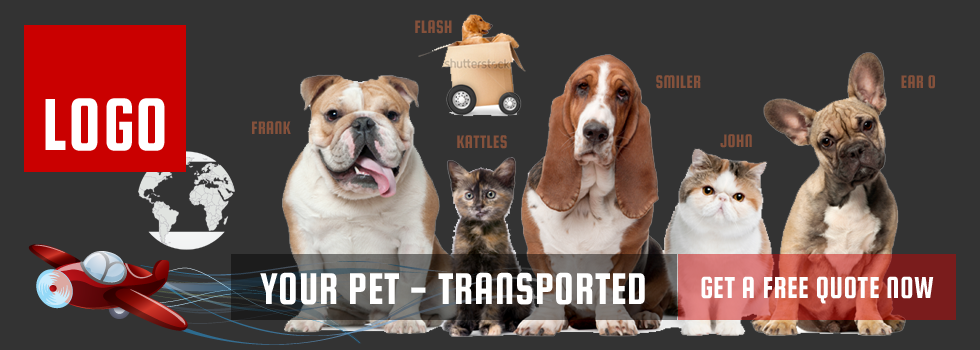
<style>
.page{position:relative;width:980px;height:350px;background:#333333}
.page>*{position:absolute;margin:0}
.t1{font:19.4px "SquadaOne-Regular";letter-spacing:0.02em;color:#85513b;scale:0.87 1}
.t2{font:78.8px "SquadaOne-Regular";letter-spacing:0.02em;color:#ffffff;scale:0.87 1}
.t3{font:47.4px "SquadaOne-Regular";letter-spacing:0.02em;color:#ffffff;scale:0.87 1}
.t4{font:32.5px "SquadaOne-Regular";letter-spacing:0.02em;color:#ffffff;scale:0.87 1}
</style>
<div class="page">
<p class="t1" style="left:415px;top:20px;width:37px;height:14px">FLASH</p>
<p class="t1" style="left:656px;top:75px;width:45px;height:14px">SMILER</p>
<p class="t1" style="left:901px;top:75px;width:34px;height:14px">EAR O</p>
<p class="t2" style="left:45px;top:98px;width:120px;height:53px">LOGO</p>
<p class="t1" style="left:252px;top:121px;width:39px;height:13px">FRANK</p>
<p class="t1" style="left:457px;top:135px;width:50px;height:14px">KATTLES</p>
<p class="t1" style="left:720px;top:134px;width:32px;height:14px">JOHN</p>
<p class="t3" style="left:260px;top:272px;width:674px;height:33px">YOUR PET - TRANSPORTED       <span class="t4">GET A FREE QUOTE NOW</span></p>
</div>
